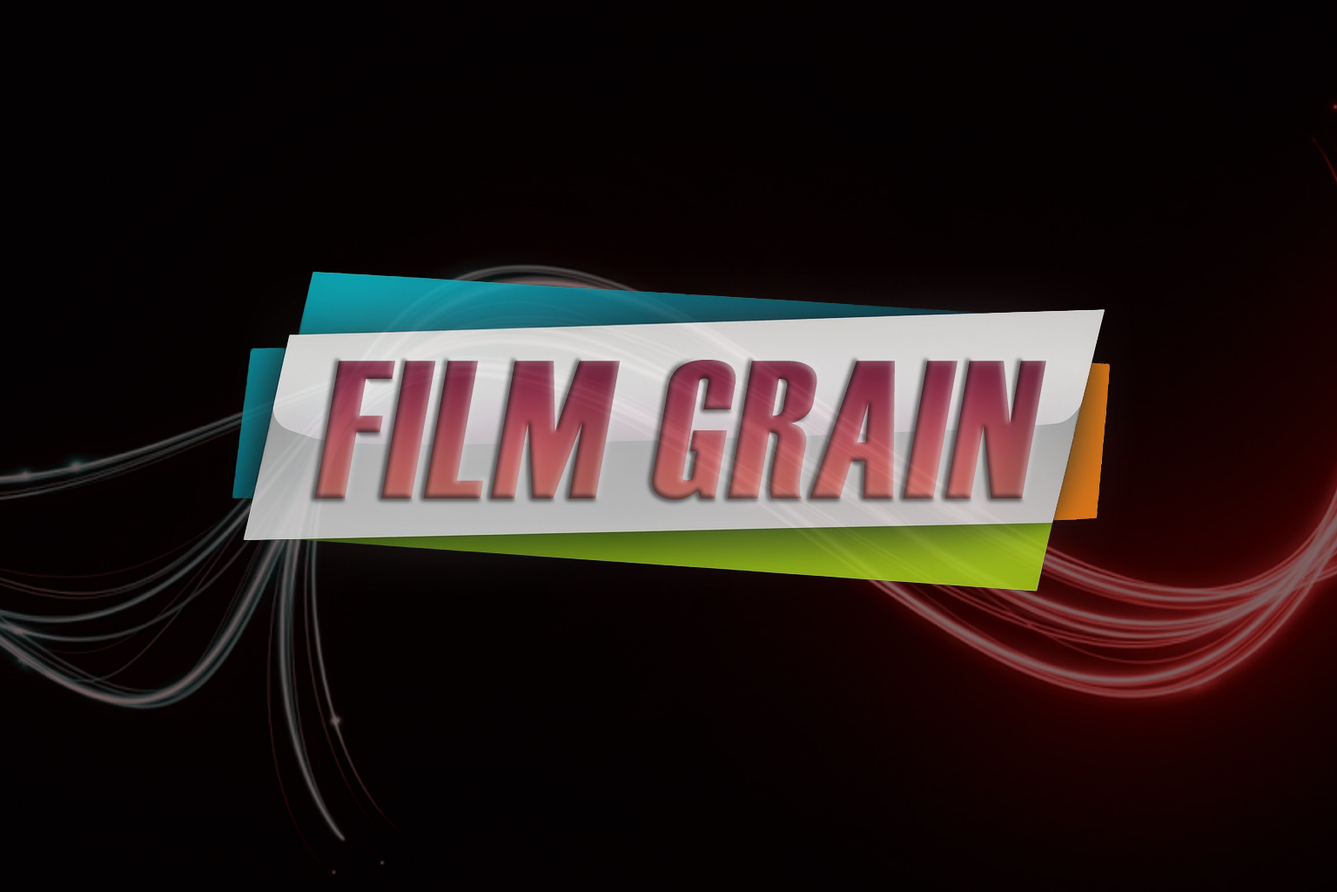
<style>
.page{position:relative;width:1337px;height:892px}
.page>*{position:absolute;margin:0}
.t1{font:195.9px "Haettenschweiler";letter-spacing:0.03em;font-style:italic}
</style>
<div class="page">
<p class="t1" style="left:314px;top:360px;width:733px;height:140px">FILM GRAIN</p>
</div>
